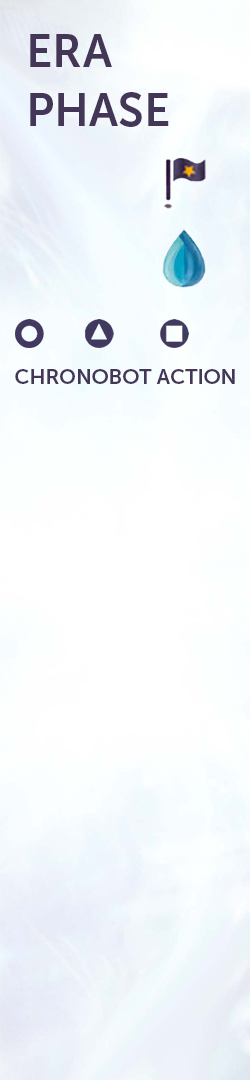
<style>
.page{position:relative;width:250px;height:1080px}
.page>*{position:absolute;margin:0}
.t1{font:45.8px "MuseoSans-700";color:#433656}
.t2{font:20.8px "MuseoSans-700";color:#433656}
</style>
<div class="page">
<p class="t1" style="left:30px;top:34px;width:82px;height:33px">ERA</p>
<p class="t1" style="left:30px;top:92px;width:139px;height:35px">PHASE</p>
<p class="t2" style="left:15px;top:369px;width:220px;height:15px">CHRONOBOT ACTION</p>
</div>
